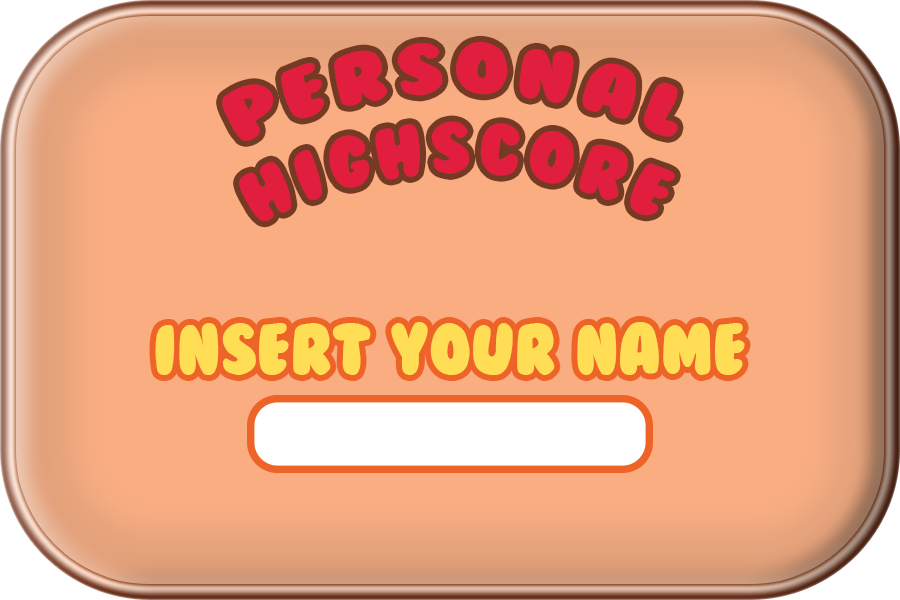
<style>
.page{position:relative;width:900px;height:600px;background:#f9ad81}
.page>*{position:absolute;margin:0}
.t1{font:66.7px "BubbleGum";letter-spacing:0.1em;color:#e11e3e}
.t2{font:66.7px "BubbleGum";color:#ffdd55}
</style>
<div class="page">
<p class="t1" style="left:222px;top:41px;width:456px;height:181px;text-align:center">Personal<br>HighScORE</p>
<p class="t2" style="left:155px;top:322px;width:590px;height:53px">insert your name</p>
</div>
